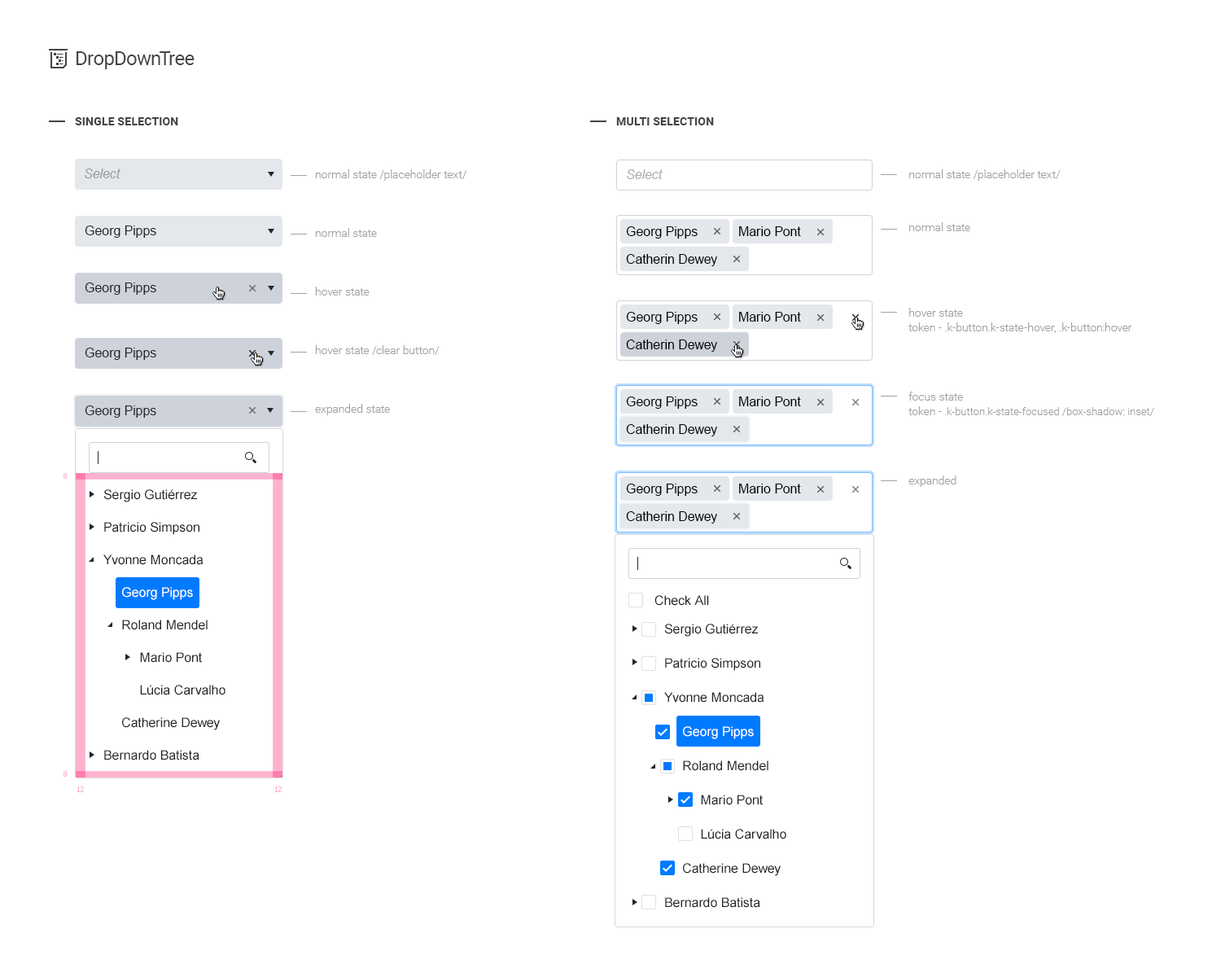
<style>
.page{position:relative;width:1221px;height:977px;background:#ffffff}
.page>*{position:absolute;margin:0}
.t1{font:19.5px "Roboto-Regular";letter-spacing:-0.025em;color:#454545}
.t2{font:11.4px "Roboto-Bold";letter-spacing:0.01em;color:#454545;text-transform:uppercase}
.t3{font:13px "Arial-ItalicMT";color:#979a9d}
.t4{font:11.4px/58.6px "Roboto-Light";color:#a1a1a1}
.t5{font:13px "Arial-ItalicMT";color:#a8a9aa}
.t6{font:11.4px/52.9px "Roboto-Light";color:#a1a1a1}
.t7{font:11.4px/14.7px "Roboto-Light";color:#a1a1a1}
.t8{font:9.8px/14.7px "Roboto-Light";color:#a1a1a1}
.t9{font:10.6px/14.7px "Roboto-Light";color:#a1a1a1}
.t10{font:11.4px/57px "Roboto-Light";color:#a1a1a1}
.t11{font:13px "ArialMT";color:#212529}
.t12{font:13px "ArialMT";color:#000000}
.t13{font:7.3px "Tahoma";color:#ffa9c8}
.t14{font:13px/32.6px "ArialMT";color:#212529}
.t15{font:13px/32.6px "ArialMT";color:#ffffff}
.t16{font:13px/34.2px "ArialMT";color:#212529}
.t17{font:13px/34.2px "ArialMT";color:#ffffff}
</style>
<div class="page">
<p class="t1" style="left:77px;top:51px;width:118px;height:18px">DropDownTree</p>
<p class="t2" style="left:75px;top:117px;width:103px;height:8px">single selection</p>
<p class="t2" style="left:616px;top:117px;width:98px;height:8px">multi selection</p>
<p class="t3" style="left:85px;top:168px;width:35px;height:10px">Select</p>
<p class="t4" style="left:315px;top:169px;width:152px;height:246px">normal state /placeholder text/<br>normal state<br>hover state<br>hover state /clear button/<br>expanded state</p>
<p class="t5" style="left:627px;top:169px;width:36px;height:10px">Select</p>
<p class="t6" style="left:908px;top:169px;width:246px;height:318px">normal state /placeholder text/<br>normal state<br>hover state<br><span class="t7">token - .k-button.k-state-hover, .k-button:hover<br></span>focus state<br><span class="t7">token - </span><span class="t8">.</span><span class="t9">k-button.k-state-focused /box-shadow: inset/<br></span><span class="t10">expanded</span></p>
<p class="t11" style="left:85px;top:225px;width:71px;height:13px">Georg Pipps</p>
<p class="t12" style="left:626px;top:226px;width:72px;height:12px">Georg Pipps</p>
<p class="t12" style="left:739px;top:226px;width:62px;height:10px">Mario Pont</p>
<p class="t12" style="left:626px;top:254px;width:91px;height:12px">Catherin Dewey</p>
<p class="t11" style="left:85px;top:282px;width:71px;height:13px">Georg Pipps</p>
<p class="t12" style="left:626px;top:312px;width:72px;height:12px">Georg Pipps</p>
<p class="t12" style="left:739px;top:312px;width:62px;height:9px">Mario Pont</p>
<p class="t12" style="left:626px;top:339px;width:91px;height:13px">Catherin Dewey</p>
<p class="t11" style="left:85px;top:348px;width:71px;height:12px">Georg Pipps</p>
<p class="t12" style="left:626px;top:396px;width:72px;height:13px">Georg Pipps</p>
<p class="t12" style="left:739px;top:396px;width:62px;height:10px">Mario Pont</p>
<p class="t11" style="left:85px;top:405px;width:71px;height:13px">Georg Pipps</p>
<p class="t12" style="left:626px;top:424px;width:91px;height:12px">Catherin Dewey</p>
<p class="t13" style="left:63px;top:473px;width:4px;height:6px">8</p>
<p class="t12" style="left:626px;top:483px;width:72px;height:13px">Georg Pipps</p>
<p class="t12" style="left:739px;top:483px;width:62px;height:10px">Mario Pont</p>
<p class="t14" style="left:103px;top:489px;width:122px;height:271px">Sergio Gutiérrez<br>Patricio Simpson<br>Yvonne Moncada<br>     <span class="t15">Georg Pipps<br>     </span>Roland Mendel<br>          Mario Pont<br>          Lúcia Carvalho<br>     Catherine Dewey<br>Bernardo Batista<br>Pedro Afonso</p>
<p class="t12" style="left:626px;top:511px;width:91px;height:12px">Catherin Dewey</p>
<p class="t11" style="left:654px;top:595px;width:55px;height:11px">Check All</p>
<p class="t16" style="left:664px;top:623px;width:122px;height:285px">Sergio Gutiérrez<br>Patricio Simpson<br>Yvonne Moncada<br>     <span class="t17">Georg Pipps<br>     </span>Roland Mendel<br>          Mario Pont<br>          Lúcia Carvalho<br>     Catherine Dewey<br>Bernardo Batista<br>Pedro Afonso</p>
<p class="t13" style="left:63px;top:771px;width:4px;height:5px">8</p>
<p class="t13" style="left:77px;top:786px;width:7px;height:6px">12</p>
<p class="t13" style="left:275px;top:786px;width:7px;height:6px">12</p>
</div>
